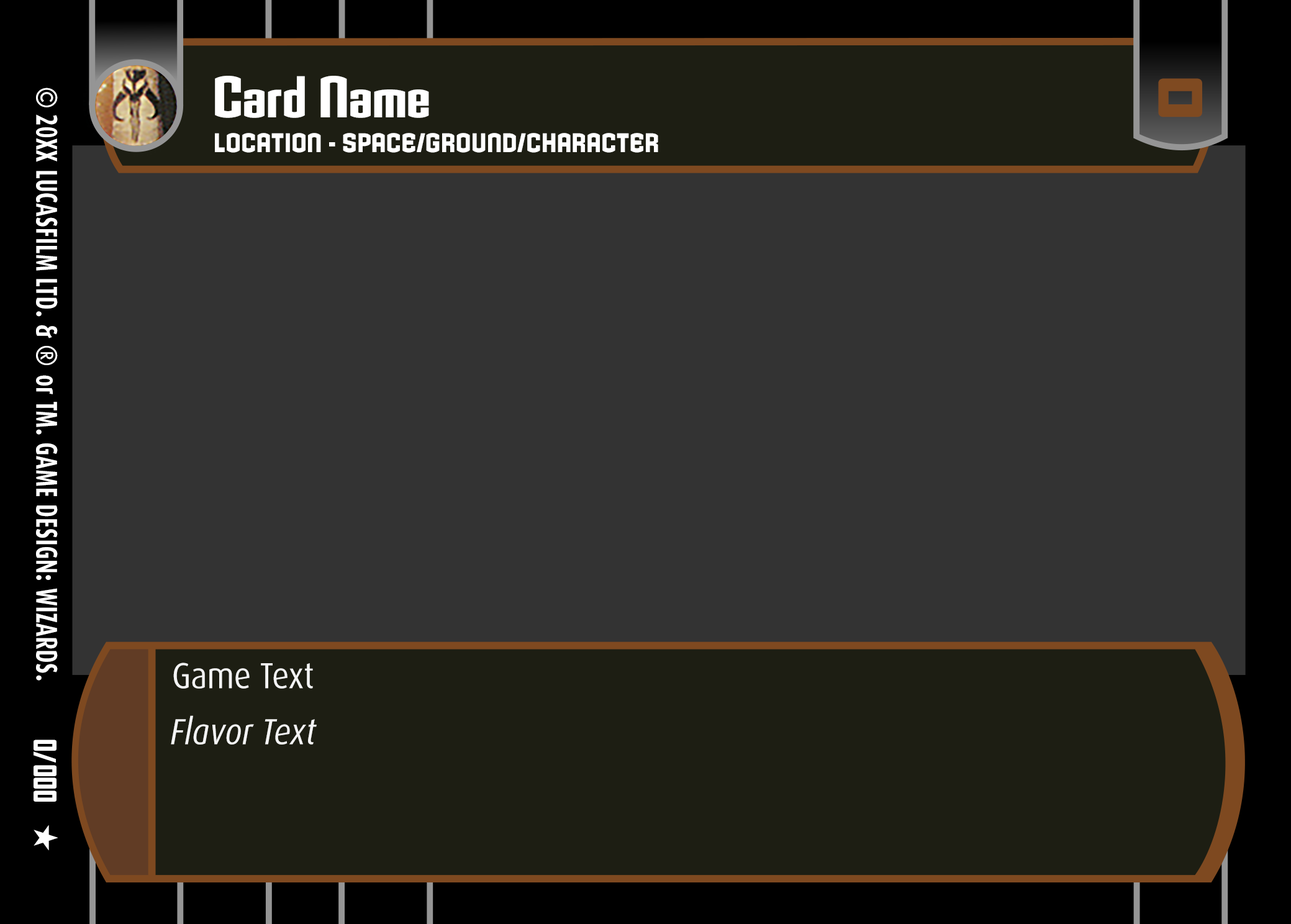
<style>
.page{position:relative;width:1291px;height:924px;background:#333333}
.page>*{position:absolute;margin:0}
.t1{font:57.1px "Armada-BoldCondensed";letter-spacing:0.002em;color:#ffffff}
.t2{font:30.1px "Dax-Bold";letter-spacing:0.02em;color:#ffffff;scale:0.71 1}
.t3{font:30.1px "Dax-Bold";color:#ffffff;scale:0.9 1}
.t4{font:30.1px "Dax-Bold";color:#ffffff;scale:0.71 1}
.t5{font:30.1px "Dax-Bold";letter-spacing:0.02em;color:#ffffff;scale:0.9 1}
.t6{font:30.1px "Dax-Bold";letter-spacing:0.032em;color:#ffffff;scale:0.71 1}
.t7{font:57.1px "AgencyFB-BlackWide";letter-spacing:0.016em;color:#7f4a21;text-transform:uppercase}
.t8{font:26.1px "Armada-Bold";letter-spacing:0.02em;color:#ffffff;text-transform:uppercase;scale:0.7 1}
.t9{font:36.2px "Dax-Regular";color:#f4f4f4;scale:0.89 1}
.t10{font:36.2px "Dax-Italic";color:#f4f4f4;scale:0.89 1}
.t11{font:29.5px "AgencyFBBlack";color:#ffffff;scale:0.82 1}
</style>
<div class="page">
<p class="t1" style="left:215px;top:76px;width:214px;height:42px">Card Name</p>
<p class="t2" style="left:36px;top:88px;width:22px;height:592px;rotate:90deg"><span class="t3">©</span><span class="t4"> 20XX </span>LUCASFILM LTD<span class="t5">.</span> &amp; <span class="t5">® </span>or TM<span class="t5">.</span> G<span class="t6">AME DES</span>IGN<span class="t5">:</span> WIZARDS<span class="t5">.</span></p>
<p class="t7" style="left:1158px;top:78px;width:44px;height:39px;rotate:90deg">0</p>
<p class="t8" style="left:215px;top:133px;width:443px;height:20px">Location - Space/Ground/Character</p>
<p class="t9" style="left:173px;top:662px;width:140px;height:27px">Game Text</p>
<p class="t10" style="left:171px;top:715px;width:146px;height:29px">Flavor Text</p>
<p class="t11" style="left:34px;top:739px;width:22px;height:63px;rotate:90deg">0/000</p>
</div>
